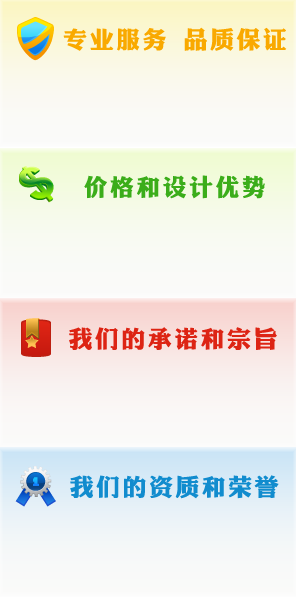
<style>
.page{position:relative;width:296px;height:600px}
.page>*{position:absolute;margin:0}
.t1{font:24px "DFLiJinHeiW8";letter-spacing:0.1em;color:#f9a900}
.t2{font:24px "DFLiJinHeiW8";letter-spacing:0.1em;color:#3bad1a}
.t3{font:24px "DFLiJinHeiW8";letter-spacing:0.1em;color:#dd2414}
.t4{font:24px "DFLiJinHeiW8";letter-spacing:0.1em;color:#118cce}
</style>
<div class="page">
<p class="t1" style="left:63px;top:27px;width:224px;height:24px">专业服务 品质保证</p>
<p class="t2" style="left:84px;top:175px;width:181px;height:24px">价格和设计优势</p>
<p class="t3" style="left:69px;top:327px;width:208px;height:23px">我们的承诺和宗旨</p>
<p class="t4" style="left:70px;top:475px;width:209px;height:24px">我们的资质和荣誉</p>
</div>
